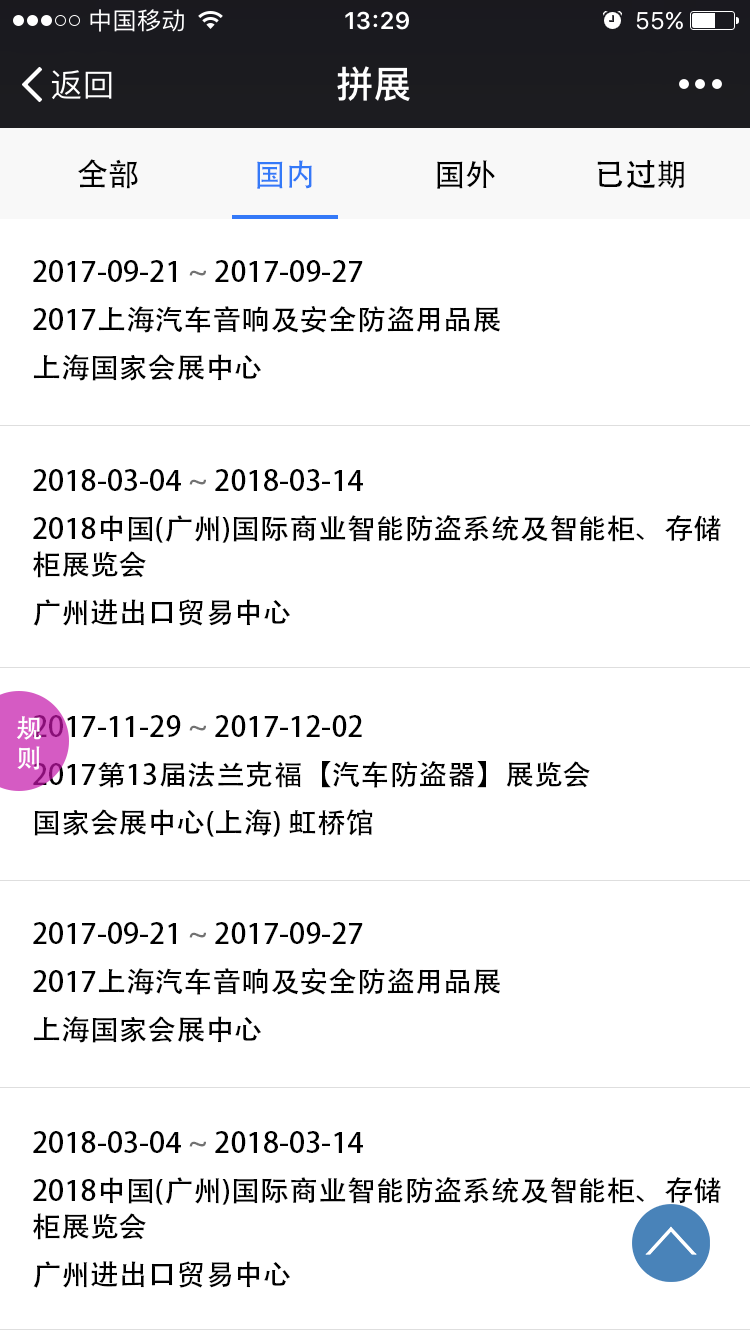
<style>
.page{position:relative;width:750px;height:1334px;background:#ffffff}
.page>*{position:absolute;margin:0}
.t1{font:31px "AdobeHeitiStd-Regular";color:#000000}
.t2{font:31px "AdobeHeitiStd-Regular";color:#3479f8}
.t3{font:28px/48px "AdobeHeitiStd-Regular";color:#000000;scale:1.03 1}
.t4{font:28px/48px "AdobeHeitiStd-Regular";color:#727272;scale:1.03 1}
.t5{font:28px/36px "AdobeHeitiStd-Regular";color:#000000;scale:1.03 1}
.t6{font:26.1px/30px "AdobeHeitiStd-Regular";color:#ffffff}
</style>
<div class="page">
<p class="t1" style="left:78px;top:159px;width:60px;height:30px">全部</p>
<p class="t2" style="left:257px;top:160px;width:55px;height:29px">国内</p>
<p class="t1" style="left:437px;top:160px;width:58px;height:29px">国外</p>
<p class="t1" style="left:597px;top:160px;width:87px;height:29px">已过期</p>
<p class="t3" style="left:33px;top:260px;width:467px;height:121px">2017-09-21 <span class="t4">~</span> 2017-09-27<br>2017上海汽车音响及安全防盗用品展<br>上海国家会展中心</p>
<p class="t5" style="left:33px;top:469px;width:688px;height:157px"><span class="t3">2018-03-04 </span><span class="t4">~</span><span class="t3"> 2018-03-14<br></span>2018中国(广州)国际商业智能防盗系统及智能柜、存储<br><span class="t3">柜展览会<br>广州进出口贸易中心</span></p>
<p class="t6" style="left:17px;top:716px;width:25px;height:54px">规<br>则</p>
<p class="t3" style="left:33px;top:715px;width:557px;height:122px">2017-11-29 <span class="t4">~</span> 2017-12-02<br>2017第13届法兰克福【汽车防盗器】展览会<br>国家会展中心(上海) 虹桥馆</p>
<p class="t3" style="left:33px;top:922px;width:467px;height:121px">2017-09-21 <span class="t4">~</span> 2017-09-27<br>2017上海汽车音响及安全防盗用品展<br>上海国家会展中心</p>
<p class="t5" style="left:33px;top:1131px;width:688px;height:157px"><span class="t3">2018-03-04 </span><span class="t4">~</span><span class="t3"> 2018-03-14<br></span>2018中国(广州)国际商业智能防盗系统及智能柜、存储<br><span class="t3">柜展览会<br>广州进出口贸易中心</span></p>
</div>
